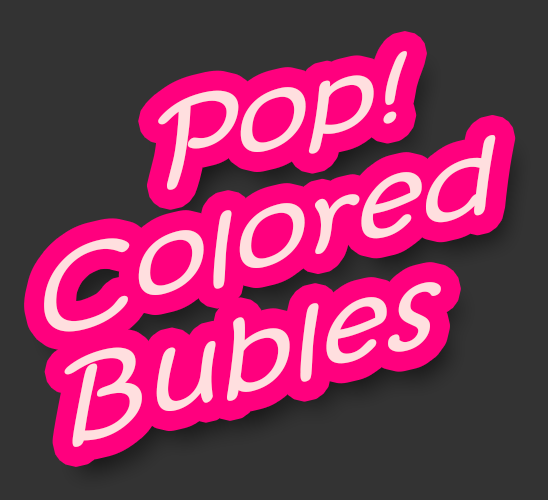
<style>
.page{position:relative;width:548px;height:500px;background:#333333}
.page>*{position:absolute;margin:0}
.t1{font:100px "KristenITC-Regular";color:#ffdfdf;scale:1.19 1}
</style>
<div class="page">
<p class="t1" style="left:44px;top:51px;width:452px;height:396px;text-align:center;rotate:-15deg">Pop!<br>Colored<br>Bubles</p>
</div>
